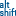
<style>
.page{position:relative;width:16px;height:16px;background:#ffffff}
.page>*{position:absolute;margin:0}
.t1{font:10px "RobotoCondensed-Regular";color:#00548b}
</style>
<div class="page">
<p class="t1" style="left:0px;top:0px;width:10px;height:8px">alt</p>
<p class="t1" style="left:0px;top:8px;width:17px;height:8px">shift</p>
</div>
